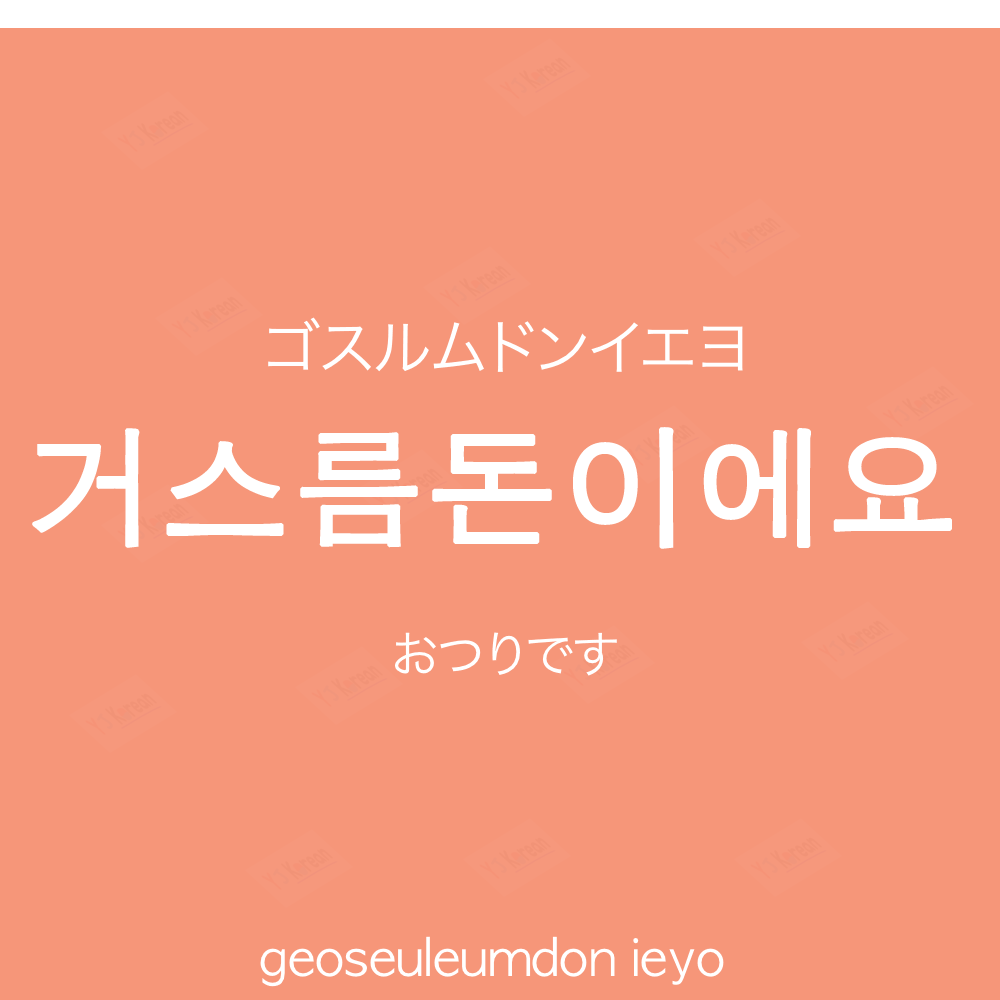
<style>
.page{position:relative;width:1000px;height:1000px;background:#f69679}
.page>*{position:absolute;margin:0}
.t1{font:60px "HiraKakuProN-W3";color:#ffffff;text-transform:uppercase}
.t2{font:130px "AppleGothic";color:#ffffff;font-weight:bold}
.t3{font:50px "HiraKakuProN-W3";color:#ffffff}
.t4{font:50px "AppleGothic";color:#ffffff}
</style>
<div class="page">
<p class="t1" style="left:268px;top:317px;width:475px;height:55px">ゴスルムドンイエヨ</p>
<p class="t2" style="left:32px;top:427px;width:920px;height:122px">거스름돈이에요</p>
<p class="t3" style="left:395px;top:632px;width:222px;height:44px">おつりです</p>
<p class="t4" style="left:260px;top:936px;width:464px;height:51px">geoseuleumdon ieyo</p>
</div>
